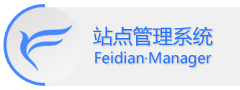
<style>
.page{position:relative;width:240px;height:90px;background:#f0f0f0}
.page>*{position:absolute;margin:0}
.t1{font:20px "MicrosoftYaHei";color:#2572fb}
.t2{font:14.7px "MicrosoftYaHei";color:#2572fb}
</style>
<div class="page">
<p class="t1" style="left:93px;top:26px;width:120px;height:20px">站点管理系统</p>
<p class="t2" style="left:95px;top:51px;width:117px;height:17px">Feidian·Manager</p>
</div>
